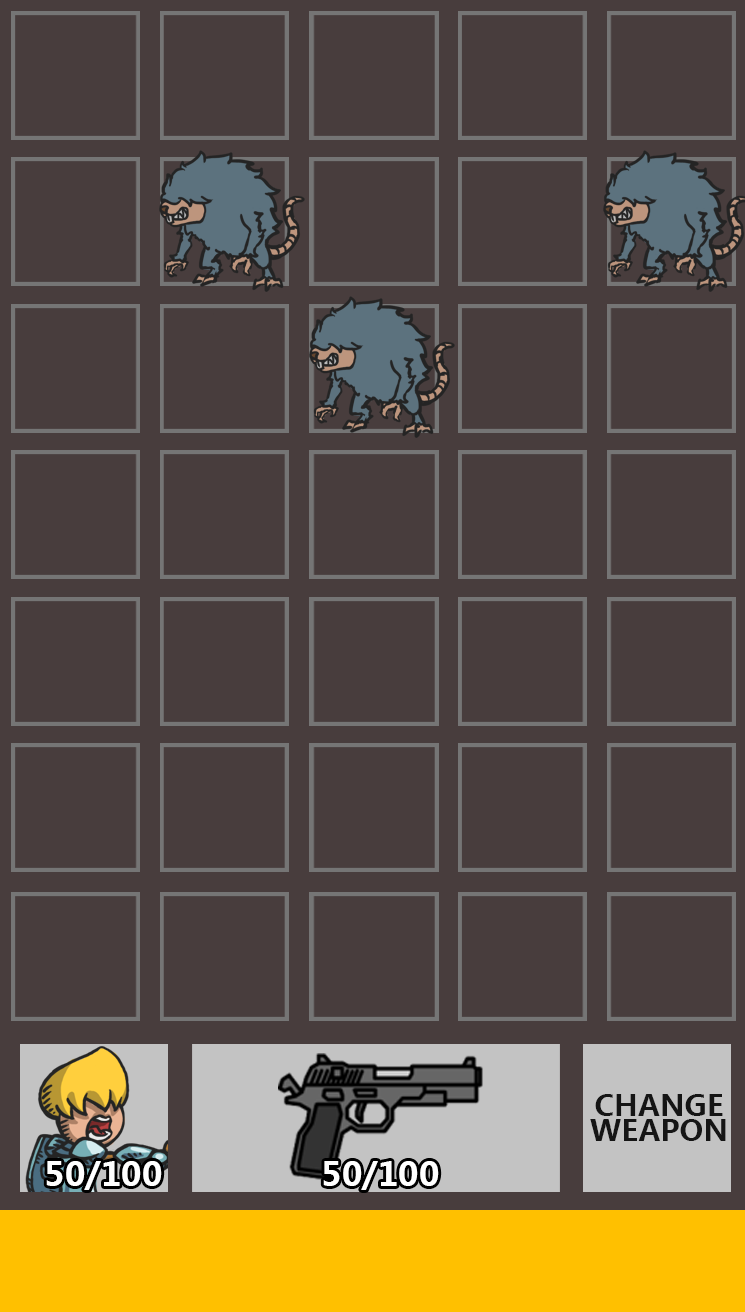
<style>
.page{position:relative;width:745px;height:1312px;background:#483d3d}
.page>*{position:absolute;margin:0}
.t1{font:29.2px/25px "MicrosoftYaHei-Bold";color:#151515}
.t2{font:33.3px "MicrosoftYaHei-Bold";color:#ffffff}
</style>
<div class="page">
<p class="t1" style="left:590px;top:1094px;width:136px;height:47px;text-align:center">CHANGE<br>WEAPON</p>
<p class="t2" style="left:46px;top:1161px;width:116px;height:29px">50/100</p>
<p class="t2" style="left:323px;top:1161px;width:116px;height:29px">50/100</p>
</div>
